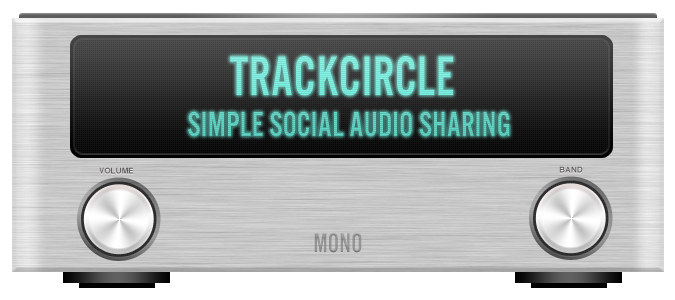
<style>
.page{position:relative;width:675px;height:300px}
.page>*{position:absolute;margin:0}
.t1{font:57.6px "AlternateGotNo3D";letter-spacing:0.025em;color:#7df1e2;scale:0.83 1}
.t2{font:36px "AlternateGotNo3D";letter-spacing:0.025em;color:#5fd3c4;scale:0.83 1}
.t3{font:8px "Helvetica-Bold";letter-spacing:0.01em;color:#645f5f}
.t4{font:28.8px "AlternateGotNo3D";letter-spacing:0.025em;color:#939393;scale:0.83 1}
</style>
<div class="page">
<p class="t1" style="left:230px;top:56px;width:223px;height:40px">TRACKCIRCLE</p>
<p class="t2" style="left:188px;top:111px;width:322px;height:26px">SIMPLE SOCIAL AUDIO SHARING</p>
<p class="t3" style="left:99px;top:167px;width:35px;height:7px">VOLUME</p>
<p class="t3" style="left:559px;top:166px;width:24px;height:7px">BAND</p>
<p class="t4" style="left:314px;top:232px;width:48px;height:21px">MONO</p>
</div>
